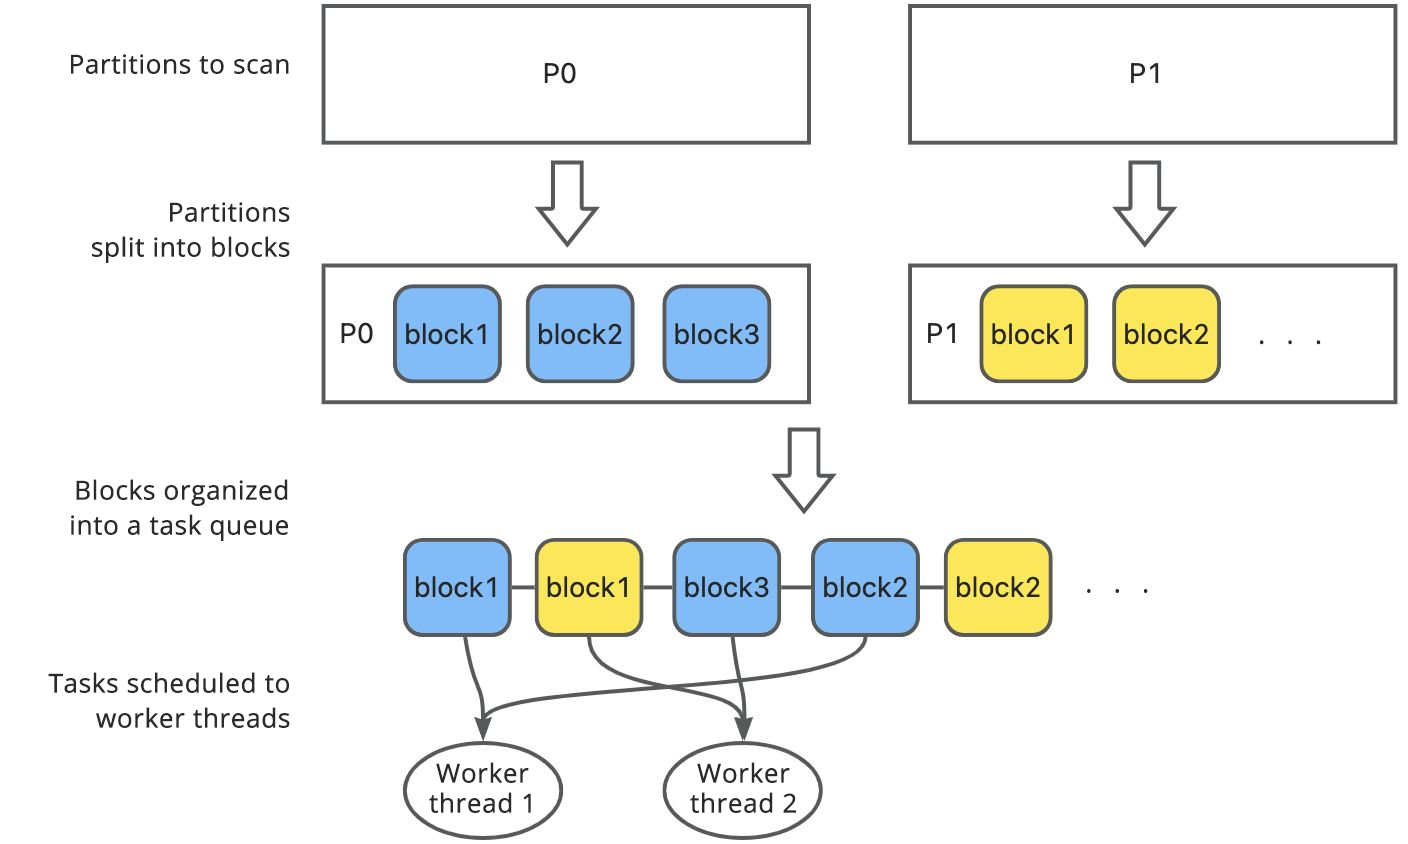
<style>
.page{position:relative;width:1408px;height:844px;background:#ffffff}
.page>*{position:absolute;margin:0}
.t1{font:26px "OpenSans";color:#2a2a2a;font-weight:bold}
.t2{font:26px/30px "OpenSans";color:#2a2a2a;font-weight:bold}
.t3{font:26px "OpenSans";letter-spacing:0.8em;color:#2a2a2a;font-weight:bold}
</style>
<div class="page">
<p class="t1" style="left:71px;top:54px;width:218px;height:20px">Partitions to scan</p>
<p class="t2" style="left:92px;top:202px;width:198px;height:61px;text-align:right">Partitions<br> split into blocks</p>
<p class="t3" style="left:1260px;top:340px;width:61px;height:5px">...</p>
<p class="t2" style="left:71px;top:479px;width:217px;height:62px;text-align:right">Blocks organized<br> into a task queue</p>
<p class="t3" style="left:1087px;top:589px;width:61px;height:4px">...</p>
<p class="t2" style="left:48px;top:672px;width:242px;height:56px;text-align:right">Tasks scheduled to<br> worker threads</p>
<p class="t2" style="left:429px;top:762px;width:102px;height:51px;text-align:right">Worker <br>thread 1</p>
<p class="t2" style="left:690px;top:762px;width:106px;height:51px;text-align:right">Worker <br>thread 2</p>
</div>
